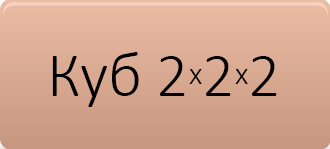
<style>
.page{position:relative;width:330px;height:149px}
.page>*{position:absolute;margin:0}
.t1{font:64px "Calibri-Light";color:#000000}
.t2{font:32px "Calibri-Light";color:#000000}
</style>
<div class="page">
<p class="t1" style="left:52px;top:52px;width:225px;height:55px">Куб 2<span class="t2">x</span>2<span class="t2">x</span>2</p>
</div>
